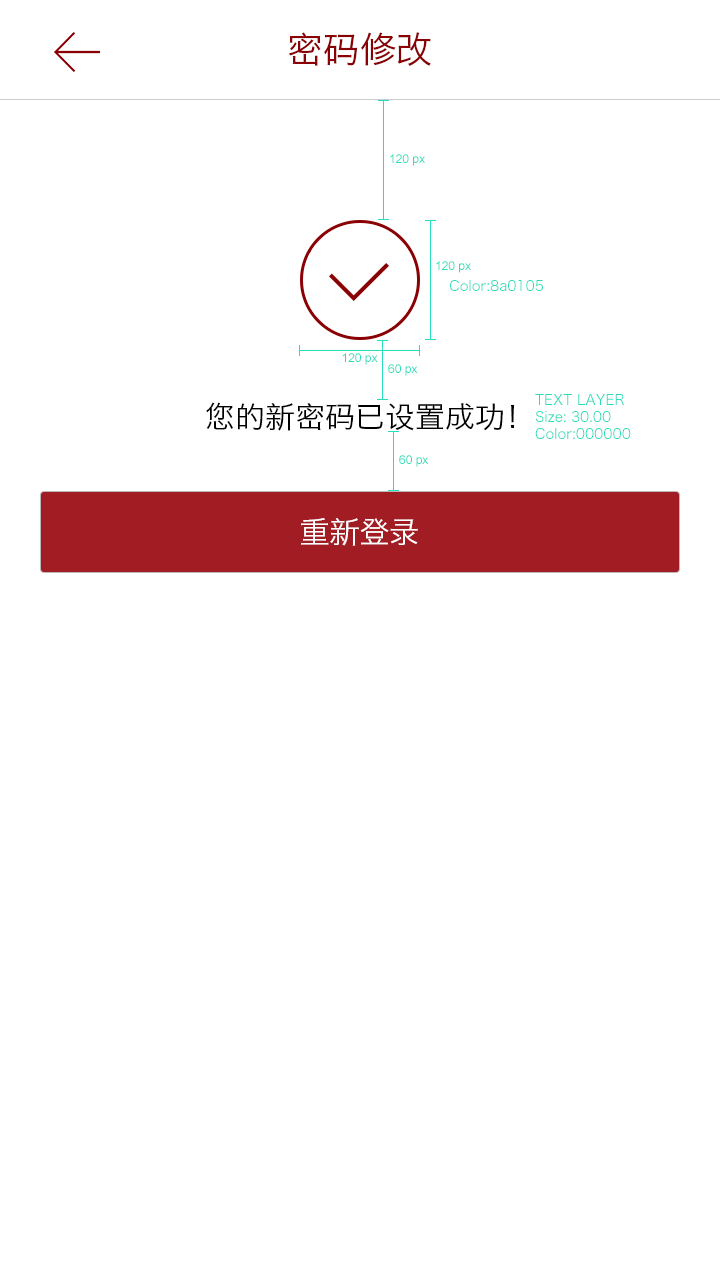
<style>
.page{position:relative;width:720px;height:1280px;background:#ffffff}
.page>*{position:absolute;margin:0}
.t1{font:36px "HiraginoSansGB-W3";color:#8a0105}
.t2{font:12px "ArialMT";color:#28ddb9}
.t3{font:14px "HiraginoSansGB-W3";color:#28ddb9}
.t4{font:30px "HiraginoSansGB-W3";color:#000000}
.t5{font:30px "HiraginoSansGB-W3";color:#ffffff}
</style>
<div class="page">
<p class="t1" style="left:289px;top:32px;width:142px;height:34px">密码修改</p>
<p class="t2" style="left:390px;top:154px;width:35px;height:12px">120 px</p>
<p class="t2" style="left:436px;top:261px;width:35px;height:12px">120 px</p>
<p class="t3" style="left:450px;top:280px;width:93px;height:11px">Color:8a0105</p>
<p class="t2" style="left:342px;top:353px;width:36px;height:12px">120 px</p>
<p class="t2" style="left:388px;top:364px;width:30px;height:12px">60 px</p>
<p class="t3" style="left:535px;top:394px;width:96px;height:45px">TEXT LAYER<br>Size: 30.00<br>Color:000000</p>
<p class="t4" style="left:206px;top:402px;width:309px;height:29px">您的新密码已设置成功！</p>
<p class="t2" style="left:399px;top:455px;width:30px;height:12px">60 px</p>
<p class="t5" style="left:301px;top:518px;width:117px;height:28px">重新登录</p>
</div>
